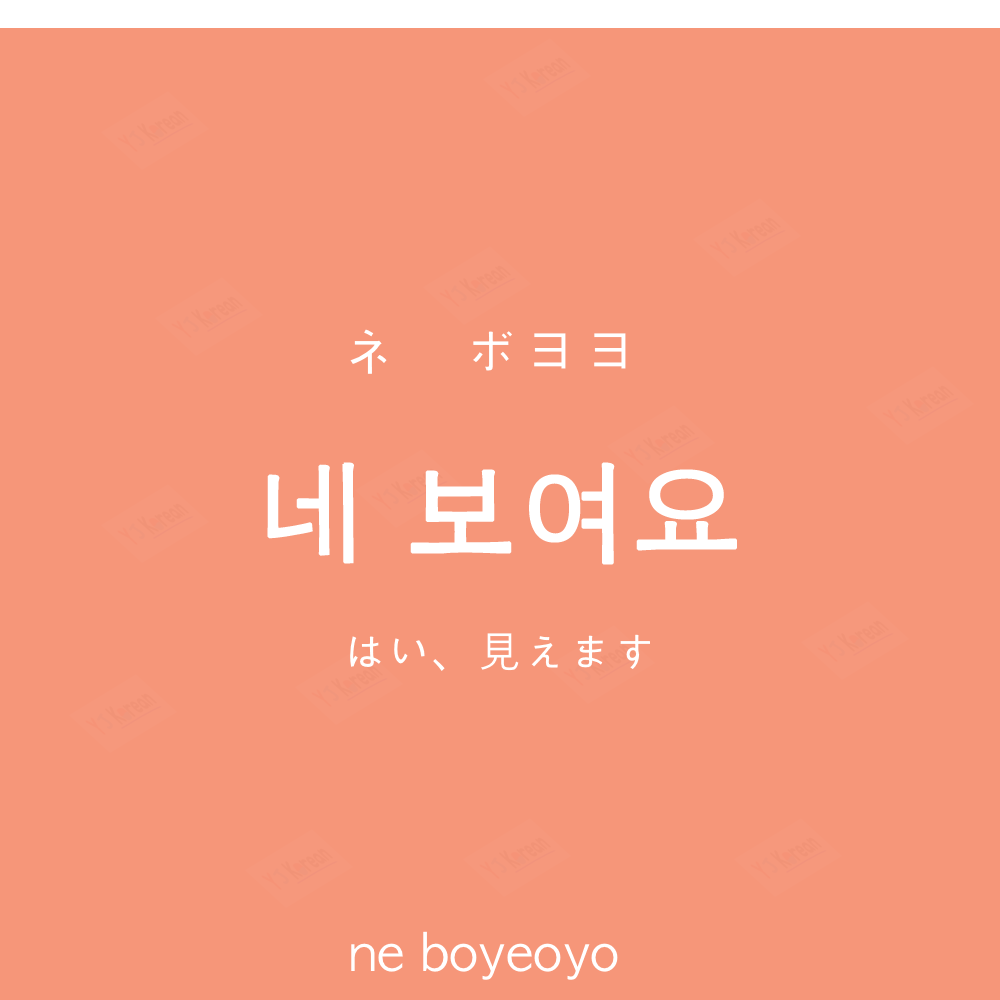
<style>
.page{position:relative;width:1000px;height:1000px;background:#f69679}
.page>*{position:absolute;margin:0}
.t1{font:60px "AppleGothic";color:#ffffff}
.t2{font:110px "AppleGothic";color:#ffffff;font-weight:bold}
.t3{font:45px "AppleGothic";color:#ffffff}
.t4{font:50px "AppleGothic";color:#ffffff}
</style>
<div class="page">
<p class="t1" style="left:350px;top:329px;width:276px;height:45px">ネ　ボヨヨ</p>
<p class="t2" style="left:267px;top:462px;width:470px;height:103px">네 보여요</p>
<p class="t3" style="left:350px;top:633px;width:300px;height:38px">はい、見えます</p>
<p class="t4" style="left:351px;top:931px;width:267px;height:49px">ne boyeoyo</p>
</div>
